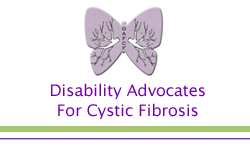
<style>
.page{position:relative;width:250px;height:150px;background:#ffffff}
.page>*{position:absolute;margin:0}
.t1{font:16px "LucidaGrande";color:#7300ad}
</style>
<div class="page">
<p class="t1" style="left:51px;top:83px;width:154px;height:36px;text-align:center">Disability Advocates <br>For Cystic Fibrosis</p>
</div>
